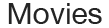
<style>
.page{position:relative;width:109px;height:28px;background:#ffffff}
.page>*{position:absolute;margin:0}
.t1{font:30px "HelveticaNeue";color:#242424}
</style>
<div class="page">
<p class="t1" style="left:8px;top:3px;width:94px;height:21px">Movies</p>
</div>
